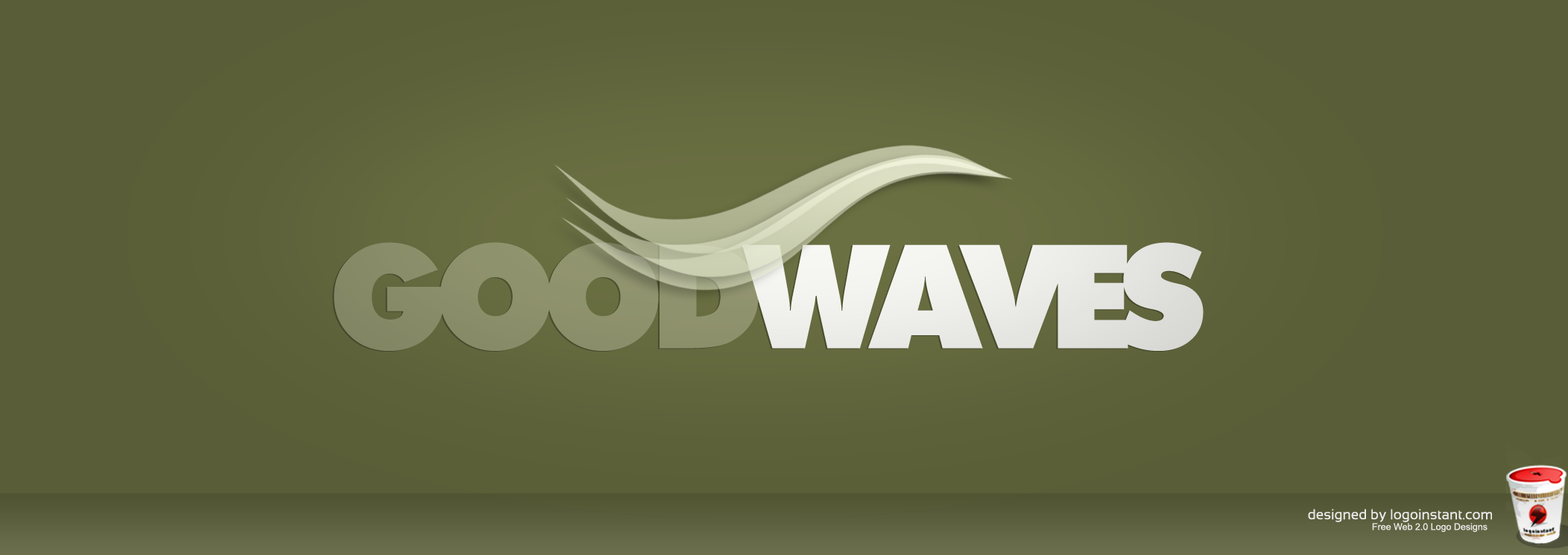
<style>
.page{position:relative;width:1568px;height:555px;background:#5a5e38}
.page>*{position:absolute;margin:0}
.t1{font:144.4px "Raiders";letter-spacing:-0.1em;color:#f9faf5}
.t2{font:144.4px "Raiders";letter-spacing:-0.1em;color:#949871}
.t3{font:14.2px "Sansation-Regular";color:#fcfcfa}
.t4{font:9.3px "ArialMT";color:#f8f6f6}
</style>
<div class="page">
<p class="t1" style="left:334px;top:242px;width:870px;height:109px"><span class="t2">GOOD</span>WAVES</p>
<p class="t3" style="left:1308px;top:509px;width:184px;height:13px">designed by logoinstant.com</p>
<p class="t4" style="left:1372px;top:523px;width:116px;height:9px">Free Web 2.0 Logo Designs</p>
</div>
